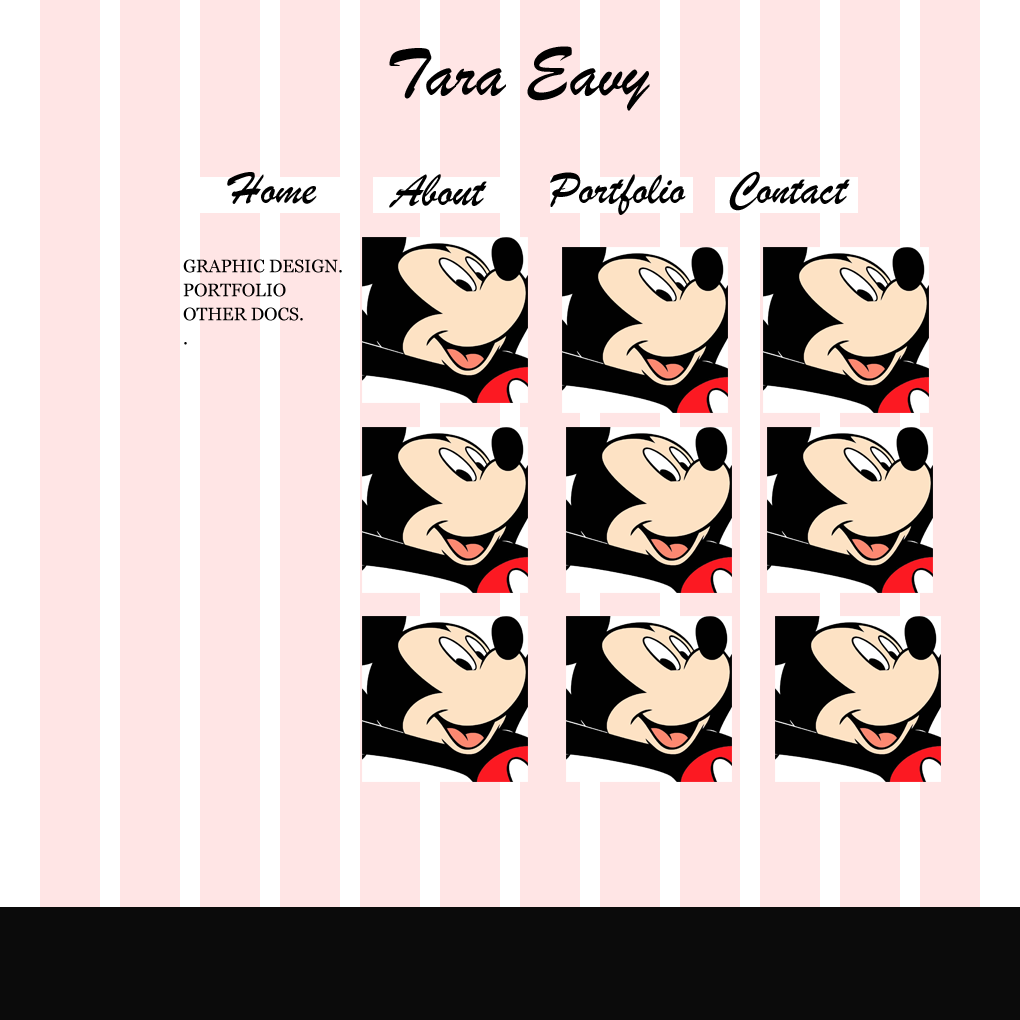
<style>
.page{position:relative;width:1020px;height:1020px;background:#ffe5e5}
.page>*{position:absolute;margin:0}
.t1{font:71.7px "BrushScriptMT";color:#000000}
.t2{font:47.8px "BrushScriptMT";color:#000000}
.t3{font:17.9px/24px "Georgia";color:#000000}
</style>
<div class="page">
<p class="t1" style="left:389px;top:46px;width:261px;height:65px">Tara Eavy</p>
<p class="t2" style="left:227px;top:172px;width:90px;height:32px">Home</p>
<p class="t2" style="left:389px;top:174px;width:98px;height:34px">About</p>
<p class="t2" style="left:550px;top:172px;width:136px;height:43px">Portfolio</p>
<p class="t2" style="left:729px;top:171px;width:121px;height:40px">Contact</p>
<p class="t3" style="left:183px;top:259px;width:159px;height:86px">GRAPHIC DESIGN.<br>PORTFOLIO<br>OTHER DOCS.<br>.</p>
</div>
